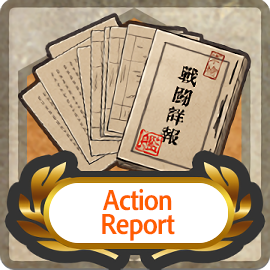
<style>
.page{position:relative;width:270px;height:270px}
.page>*{position:absolute;margin:0}
.t1{font:30px/24px "AdobeClean-Bold";letter-spacing:-0.04em;color:#ff5d00;scale:0.9 1}
</style>
<div class="page">
<p class="t1" style="left:102px;top:188px;width:73px;height:53px;text-align:center">Action<br>Report</p>
</div>
